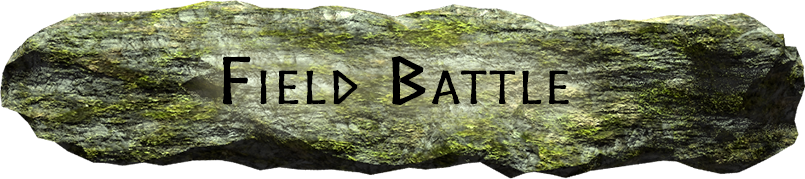
<style>
.page{position:relative;width:805px;height:179px}
.page>*{position:absolute;margin:0}
.t1{font:61.2px "Norse";color:#000000;font-variant:small-caps;font-weight:bold;scale:1.76 1}
</style>
<div class="page">
<p class="t1" style="left:222px;top:56px;width:347px;height:50px">Field Battle</p>
</div>
